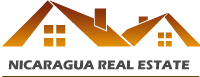
<style>
.page{position:relative;width:200px;height:77px;background:#ffffff}
.page>*{position:absolute;margin:0}
.t1{font:13.2px "ErasITC-Bold";color:#4b4848;text-transform:uppercase}
</style>
<div class="page">
<p class="t1" style="left:8px;top:60px;width:182px;height:10px">NICARAGUA REAL ESTATE</p>
</div>
